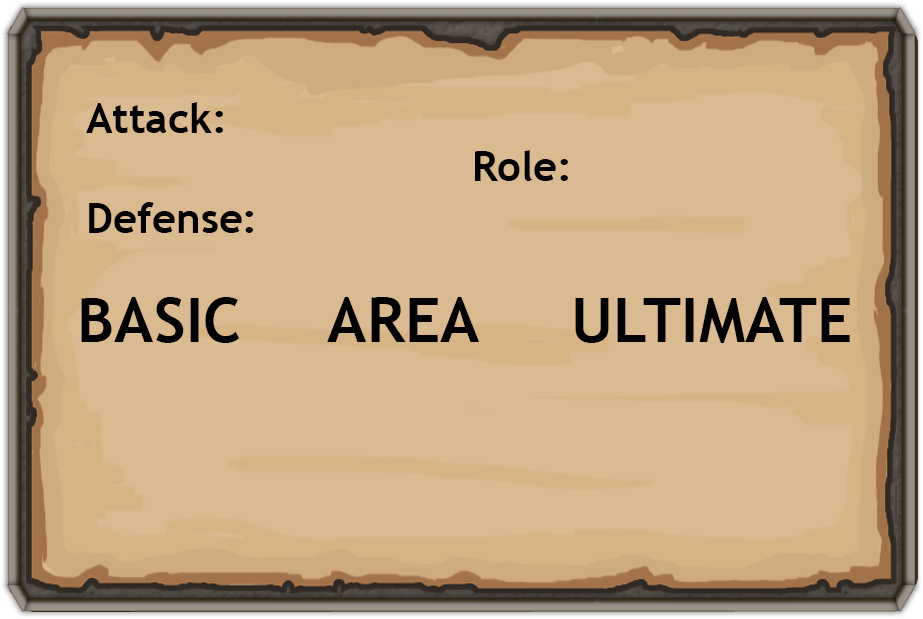
<style>
.page{position:relative;width:923px;height:619px;background:#daba91}
.page>*{position:absolute;margin:0}
.t1{font:41.7px "TrebuchetMS-Bold";color:#000000}
.t2{font:62.5px "TrebuchetMS-Bold";color:#000000}
</style>
<div class="page">
<p class="t1" style="left:86px;top:102px;width:167px;height:131px">Attack:<br><br>Defense:</p>
<p class="t1" style="left:475px;top:150px;width:93px;height:31px">Role:</p>
<p class="t2" style="left:81px;top:297px;width:769px;height:46px">BASIC    AREA     ULTIMATE</p>
</div>
